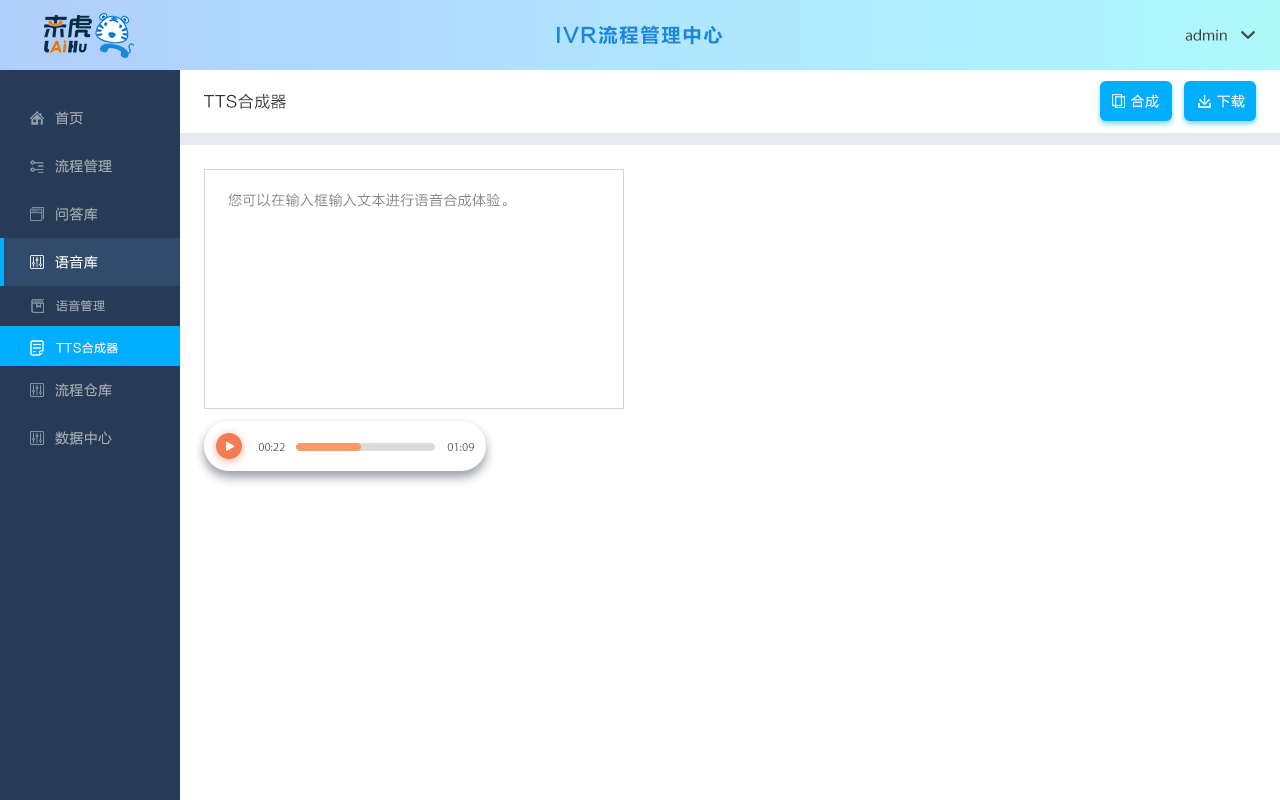
<style>
.page{position:relative;width:1280px;height:800px;background:#ffffff}
.page>*{position:absolute;margin:0}
.t1{font:20px "FZLTCHJW--GB1-0";letter-spacing:0.05em;color:#1a88d9}
.t2{font:16px "MyriadPro-Regular";color:#444444}
.t3{font:16px "FZLTHJW--GB1-0";letter-spacing:0.025em;color:#333333}
.t4{font:14px "FZLTHJW--GB1-0";letter-spacing:0.05em;color:#ffffff}
.t5{font:14px "FZLTHJW--GB1-0";letter-spacing:0.025em;color:#a9afb7}
.t6{font:14px "FZLTHJW--GB1-0";letter-spacing:0.025em;color:#aaafb7}
.t7{font:14px "FZLTHJW--GB1-0";letter-spacing:0.025em;color:#888888}
.t8{font:14px "FZLTHJW--GB1-0";letter-spacing:0.025em;color:#ffffff}
.t9{font:12px "FZLTHJW--GB1-0";letter-spacing:0.025em;color:#aaafb7}
.t10{font:12px "FZLTHJW--GB1-0";letter-spacing:0.025em;color:#ffffff}
.t11{font:12px "MyriadPro-Regular";color:#535861}
</style>
<div class="page">
<p class="t1" style="left:557px;top:25px;width:166px;height:20px">IVR流程管理中心</p>
<p class="t2" style="left:1185px;top:29px;width:42px;height:12px">admin</p>
<p class="t3" style="left:204px;top:94px;width:82px;height:15px">TTS合成器</p>
<p class="t4" style="left:1131px;top:94px;width:28px;height:14px">合成</p>
<p class="t4" style="left:1217px;top:94px;width:28px;height:14px">下载</p>
<p class="t5" style="left:55px;top:111px;width:28px;height:14px">首页</p>
<p class="t6" style="left:55px;top:159px;width:57px;height:14px">流程管理</p>
<p class="t7" style="left:228px;top:193px;width:279px;height:14px">您可以在输入框输入文本进行语音合成体验。</p>
<p class="t6" style="left:56px;top:207px;width:42px;height:14px">问答库</p>
<p class="t8" style="left:55px;top:255px;width:43px;height:14px">语音库</p>
<p class="t9" style="left:56px;top:300px;width:49px;height:12px">语音管理</p>
<p class="t10" style="left:56px;top:342px;width:62px;height:12px">TTS合成器</p>
<p class="t6" style="left:55px;top:383px;width:57px;height:14px">流程仓库</p>
<p class="t6" style="left:55px;top:431px;width:57px;height:14px">数据中心</p>
<p class="t11" style="left:258px;top:443px;width:27px;height:8px">00:22</p>
<p class="t11" style="left:447px;top:443px;width:27px;height:8px">01:09</p>
</div>
